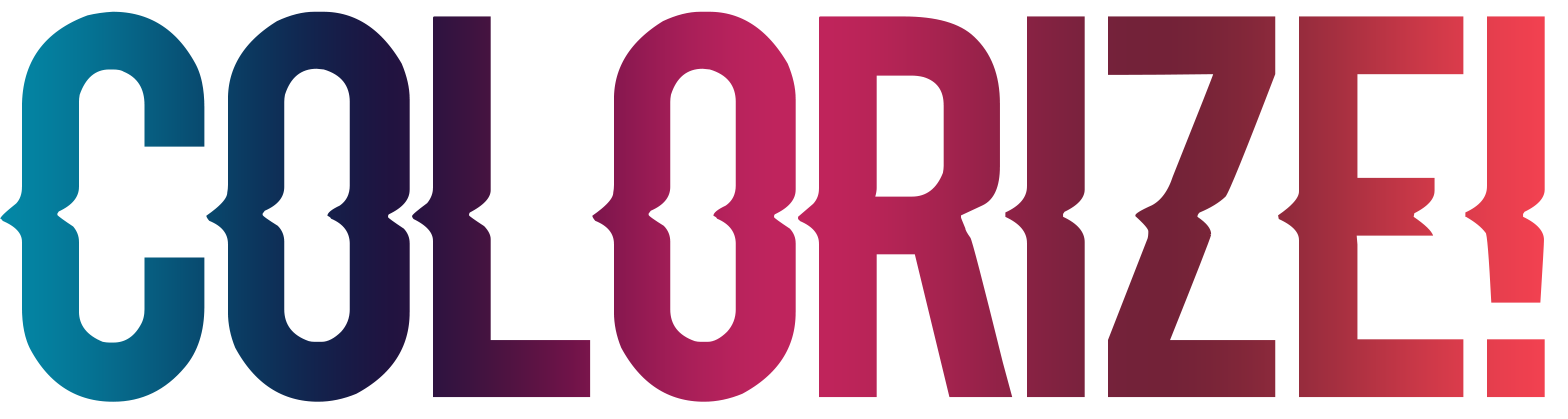
<style>
.page{position:relative;width:1568px;height:419px;background:#ffffff}
.page>*{position:absolute;margin:0}
.t1{font:369.1px "Blacklisted";letter-spacing:0.015em}
</style>
<div class="page">
<p class="t1" style="left:0px;top:11px;width:1545px;height:391px">Colorize!</p>
</div>
